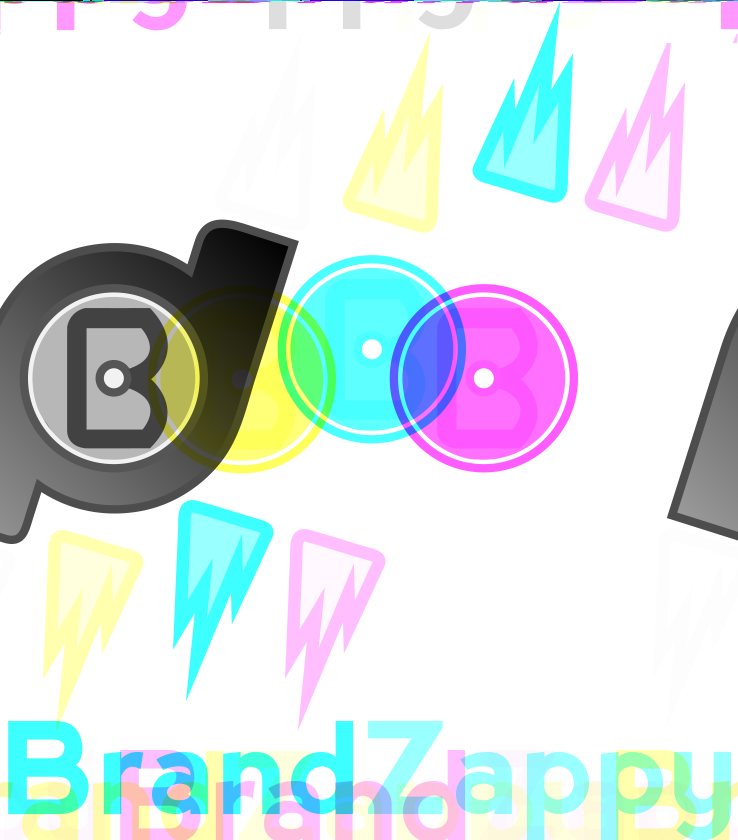
<style>
.page{position:relative;width:738px;height:840px;background:#ffffff}
.page>*{position:absolute;margin:0}
.t1{font:126.8px "nevis-Bold"}
</style>
<div class="page">
<p class="t1" style="left:6px;top:719px;width:724px;height:121px">BrandZappy</p>
</div>
